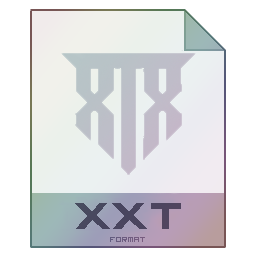
<style>
.page{position:relative;width:256px;height:256px;background:#ffffff}
.page>*{position:absolute;margin:0}
.t1{font:48.5px "FortisSCapsSSiBold";letter-spacing:0.015em;color:#4a455f}
</style>
<div class="page">
<p class="t1" style="left:75px;top:203px;width:106px;height:26px">XXT</p>
</div>
